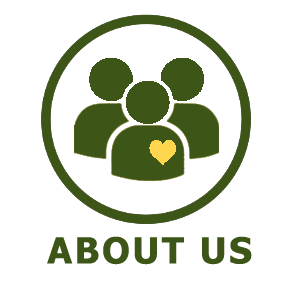
<style>
.page{position:relative;width:298px;height:287px;background:#ffffff}
.page>*{position:absolute;margin:0}
.t1{font:36px "Tahoma-Bold";letter-spacing:0.075em;color:#3e5518}
</style>
<div class="page">
<p class="t1" style="left:47px;top:236px;width:205px;height:29px">ABOUT US</p>
</div>
